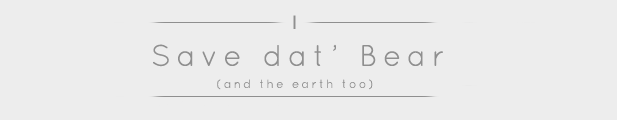
<style>
.page{position:relative;width:617px;height:120px;background:#ededed}
.page>*{position:absolute;margin:0}
.t1{font:18px "Mangal";color:#8f8f8f}
.t2{font:30px "QuicksandBook-Regular";letter-spacing:0.2em;color:#8f8f8f}
.t3{font:12px "QuicksandBook-Regular";letter-spacing:0.2em;color:#8f8f8f}
</style>
<div class="page">
<p class="t1" style="left:293px;top:15px;width:3px;height:14px">I</p>
<p class="t2" style="left:153px;top:44px;width:290px;height:23px">Save dat’ Bear</p>
<p class="t3" style="left:217px;top:79px;width:156px;height:11px">(and the earth too)</p>
</div>
